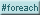
<style>
.page{position:relative;width:40px;height:15px;background:#bde1e4}
.page>*{position:absolute;margin:0}
.t1{font:9px "ArialMT";color:#2c676c}
</style>
<div class="page">
<p class="t1" style="left:2px;top:4px;width:36px;height:7px">#foreach</p>
</div>
